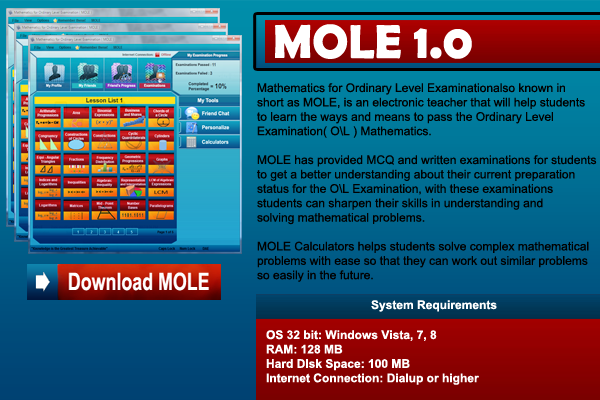
<style>
.page{position:relative;width:600px;height:400px}
.page>*{position:absolute;margin:0}
.t1{font:48px "BerlinSansFBDemi-Bold";color:#ffffff}
.t2{font:12px "ArialMT";color:#000000}
.t3{font:12px "Arial-BoldMT";color:#ffffff}
</style>
<div class="page">
<p class="t1" style="left:275px;top:24px;width:197px;height:35px">MOLE 1.0</p>
<p class="t2" style="left:257px;top:83px;width:340px;height:199px">Mathematics for Ordinary Level Examinationalso known in <br>short as MOLE, is an electronic teacher that will help students <br>to learn the ways and means to pass the Ordinary Level <br>Examination( O\L ) Mathematics. <br><br>MOLE has provided MCQ and written examinations for students<br>to get a better understanding about their current preparation <br>status for the O\L Examination, with these examinations <br>students can sharpen their skills in understanding and <br>solving mathematical problems.<br><br>MOLE Calculators helps students solve complex mathematical <br>problems with ease so that they can work out similar problems<br>so easily in the future.</p>
<p class="t3" style="left:371px;top:300px;width:126px;height:12px">System Requirements</p>
<p class="t3" style="left:266px;top:330px;width:213px;height:55px">OS 32 bit: Windows Vista, 7, 8<br>RAM: 128 MB<br>Hard DIsk Space: 100 MB<br>Internet Connection: Dialup or higher</p>
</div>
